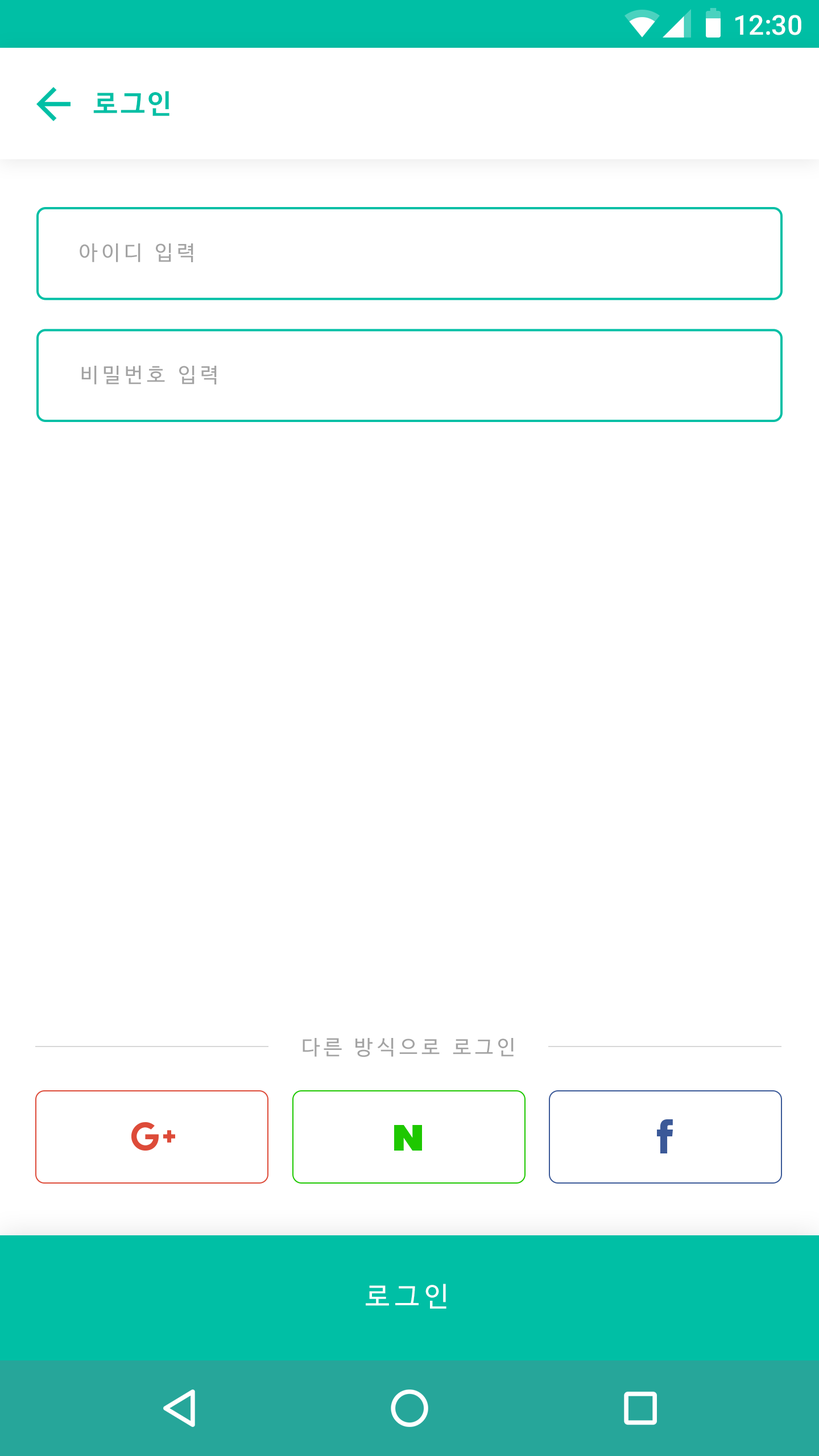
<style>
.page{position:relative;width:819px;height:1456px;background:#ffffff}
.page>*{position:absolute;margin:0}
.t1{font:27.3px "Roboto-Medium";color:#ffffff}
.t2{font:27.3px "NanumBarunGothicBold";letter-spacing:0.1em;color:#00bfa5}
.t3{font:20.5px "NanumBarunGothic";letter-spacing:0.2em;color:#a3a3a3}
.t4{font:27.3px "NanumBarunGothic";letter-spacing:0.2em;color:#ffffff}
</style>
<div class="page">
<p class="t1" style="left:735px;top:15px;width:66px;height:20px">12:30</p>
<p class="t2" style="left:93px;top:91px;width:76px;height:25px">로그인</p>
<p class="t3" style="left:80px;top:243px;width:113px;height:19px">아이디 입력</p>
<p class="t3" style="left:81px;top:365px;width:136px;height:19px">비밀번호 입력</p>
<p class="t3" style="left:303px;top:1038px;width:211px;height:19px">다른 방식으로 로그인</p>
<p class="t4" style="left:366px;top:1284px;width:80px;height:25px">로그인</p>
</div>
